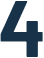
<style>
.page{position:relative;width:44px;height:58px;background:#ffffff}
.page>*{position:absolute;margin:0}
.t1{font:80px "Barlow-Bold";color:#183349}
</style>
<div class="page">
<p class="t1" style="left:0px;top:1px;width:43px;height:56px">4</p>
</div>
